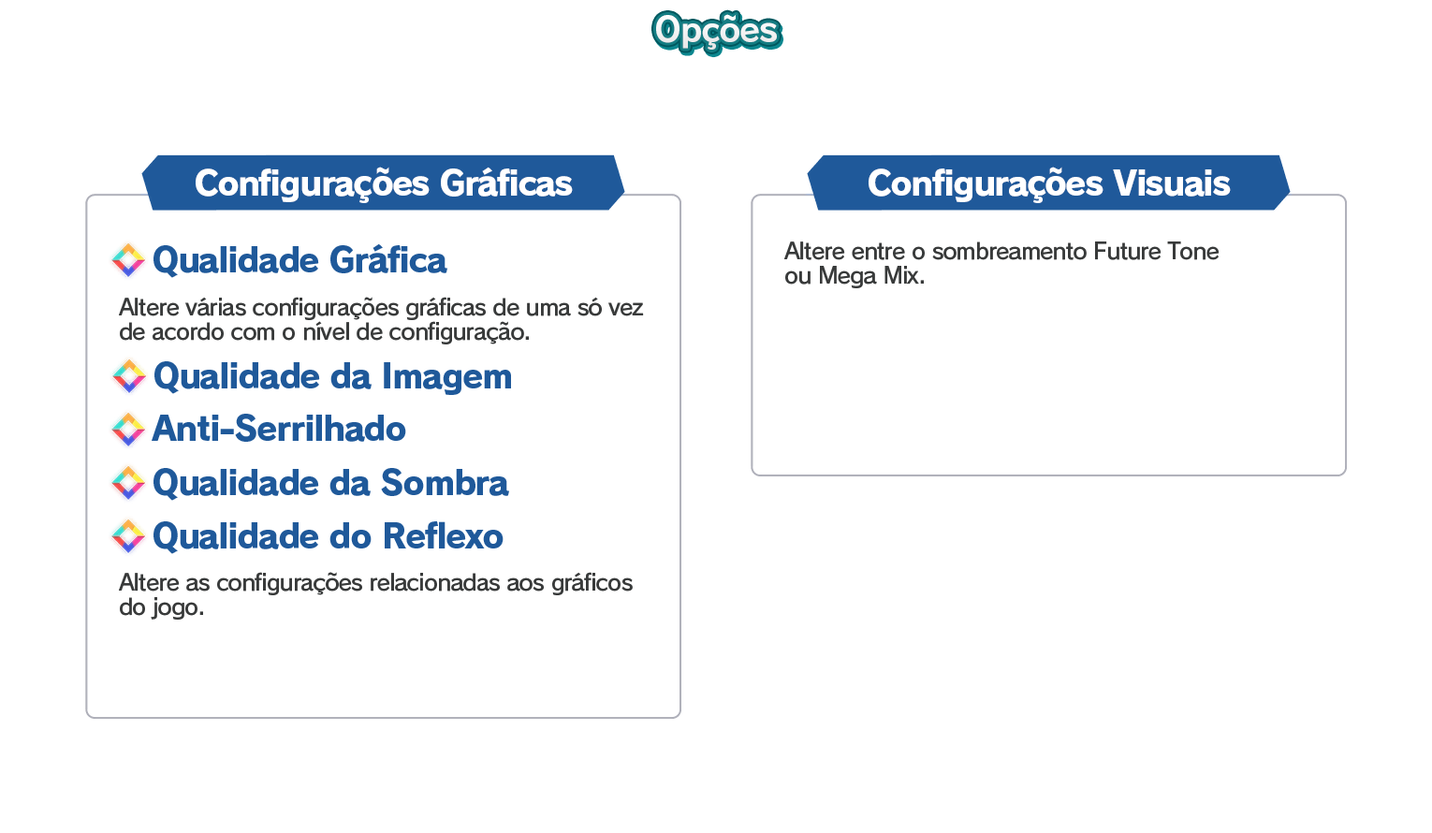
<style>
.page{position:relative;width:1432px;height:833px;background:#ffffff}
.page>*{position:absolute;margin:0}
.t1{font:33.7px "RodinPro-B";letter-spacing:-0.039em;color:#f2f3f3}
.t2{font:33.7px "RodinPro-EB";letter-spacing:-0.048em;color:#ffffff}
.t3{font:33.7px "RodinPro-EB";letter-spacing:-0.04em;color:#1f599a}
.t4{font:22.5px/23.7px "RodinPro-DB";letter-spacing:-0.04em;color:#383a3a}
</style>
<div class="page">
<p class="t1" style="left:656px;top:14px;width:121px;height:36px">Opções</p>
<p class="t2" style="left:196px;top:167px;width:377px;height:36px">Configurações Gráficas</p>
<p class="t2" style="left:868px;top:167px;width:363px;height:36px">Configurações Visuais</p>
<p class="t3" style="left:153px;top:243px;width:294px;height:35px">Qualidade Gráfica</p>
<p class="t4" style="left:784px;top:241px;width:435px;height:47px">Altere entre o sombreamento Future Tone<br>ou Mega Mix.</p>
<p class="t4" style="left:119px;top:297px;width:525px;height:47px">Altere várias configurações gráficas de uma só vez<br>de acordo com o nível de configuração.</p>
<p class="t3" style="left:154px;top:361px;width:357px;height:34px">Qualidade da Imagem</p>
<p class="t3" style="left:152px;top:414px;width:254px;height:28px">Anti-Serrilhado</p>
<p class="t3" style="left:153px;top:468px;width:356px;height:33px">Qualidade da Sombra</p>
<p class="t3" style="left:153px;top:521px;width:350px;height:33px">Qualidade do Reflexo</p>
<p class="t4" style="left:119px;top:572px;width:514px;height:47px">Altere as configurações relacionadas aos gráficos<br>do jogo.</p>
</div>
